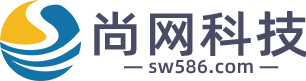
<style>
.page{position:relative;width:306px;height:81px;background:#ffffff}
.page>*{position:absolute;margin:0}
.t1{font:49.6px "AlibabaPuHuiTi-Medium";letter-spacing:0.02em;color:#4a4b65;scale:1.12 1}
.t2{font:18.7px "AlibabaPuHuiTi-Medium";letter-spacing:0.02em;color:#4a4b65}
</style>
<div class="page">
<p class="t1" style="left:94px;top:11px;width:213px;height:47px">尚网科技</p>
<p class="t2" style="left:124px;top:59px;width:155px;height:15px">— sw586.com —</p>
</div>
